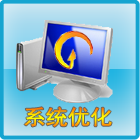
<style>
.page{position:relative;width:140px;height:140px}
.page>*{position:absolute;margin:0}
.t1{font:20.9px "SimHei";scale:1.07 1}
</style>
<div class="page">
<p class="t1" style="left:24px;top:107px;width:88px;height:20px">系统优化</p>
</div>
